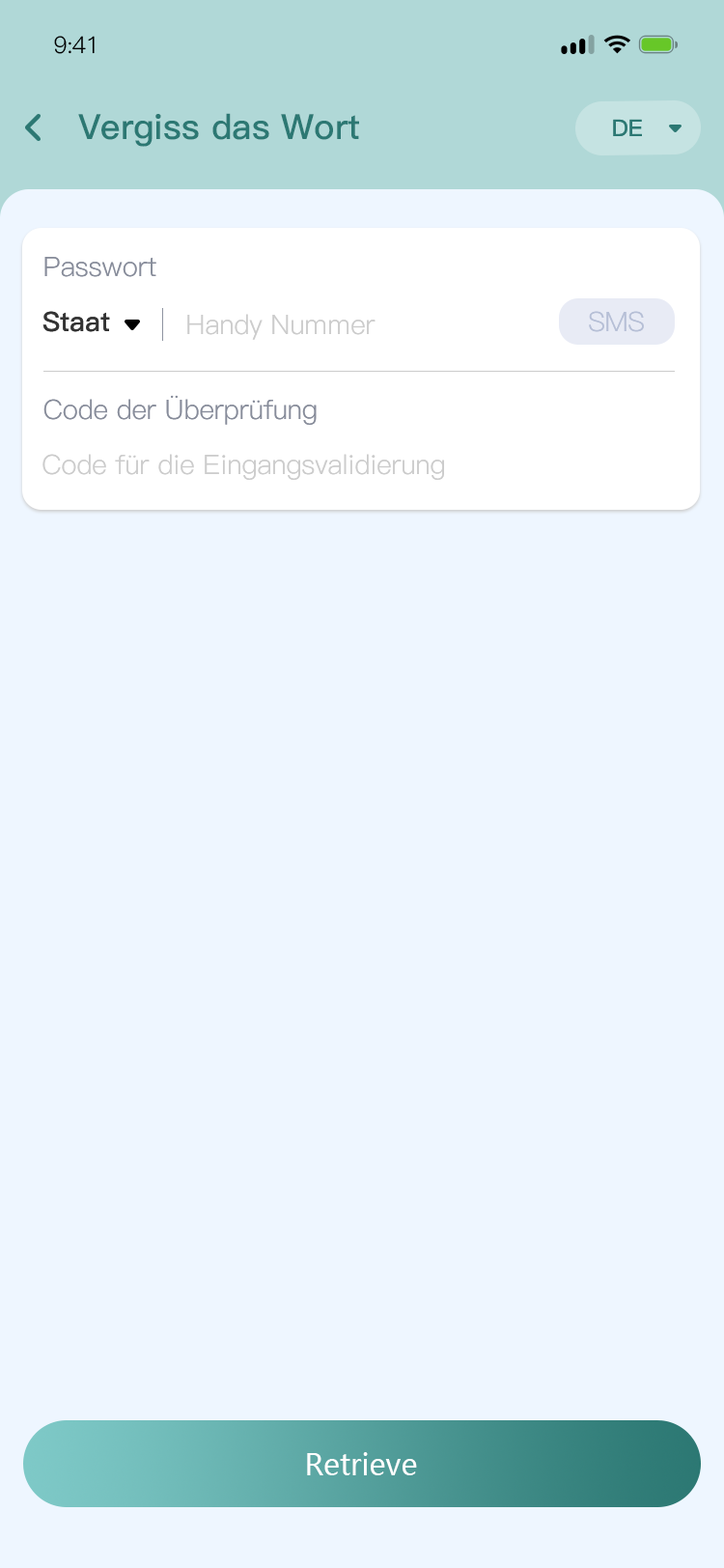
<style>
.page{position:relative;width:724px;height:1568px;background:#eef6ff}
.page>*{position:absolute;margin:0}
.t1{font:23.2px "PingFang-SC-Regular";letter-spacing:-0.025em;color:#000000}
.t2{font:34.8px "PingFang-SC-Bold";color:#2c7873}
.t3{font:34.8px "PingFang-SC-Bold";color:#2c7873;text-transform:uppercase}
.t4{font:23.2px "PingFang-SC-Bold";color:#2c7873}
.t5{font:27px "PingFang-SC-Regular";color:#878c9a}
.t6{font:27px "PingFang-SC-Regular";color:#878c9a;text-transform:uppercase}
.t7{font:27px "PingFang-SC-Bold";color:#333333}
.t8{font:27px "PingFang-SC-Bold";color:#333333;text-transform:uppercase}
.t9{font:27px "PingFang-SC-Regular";color:#cccccc}
.t10{font:27px "PingFang-SC-Regular";color:#b6bfd6;text-transform:uppercase}
.t11{font:29px "MicrosoftYaHei";color:#ffffff}
</style>
<div class="page">
<p class="t1" style="left:54px;top:36px;width:41px;height:18px">9:41</p>
<p class="t2" style="left:78px;top:113px;width:281px;height:34px"><span class="t3">V</span>ergiss das Wort</p>
<p class="t4" style="left:613px;top:119px;width:29px;height:17px">DE</p>
<p class="t5" style="left:44px;top:257px;width:112px;height:20px"><span class="t6">P</span>asswort</p>
<p class="t7" style="left:42px;top:311px;width:68px;height:21px"><span class="t8">S</span>taat</p>
<p class="t9" style="left:187px;top:314px;width:189px;height:26px">Handy Nummer</p>
<p class="t10" style="left:589px;top:311px;width:55px;height:21px">SMS</p>
<p class="t5" style="left:43px;top:395px;width:274px;height:30px"><span class="t6">C</span>ode der Überprüfung</p>
<p class="t9" style="left:42px;top:454px;width:402px;height:26px">Code für die Eingangsvalidierung</p>
<p class="t11" style="left:307px;top:1452px;width:110px;height:23px">Retrieve</p>
</div>
